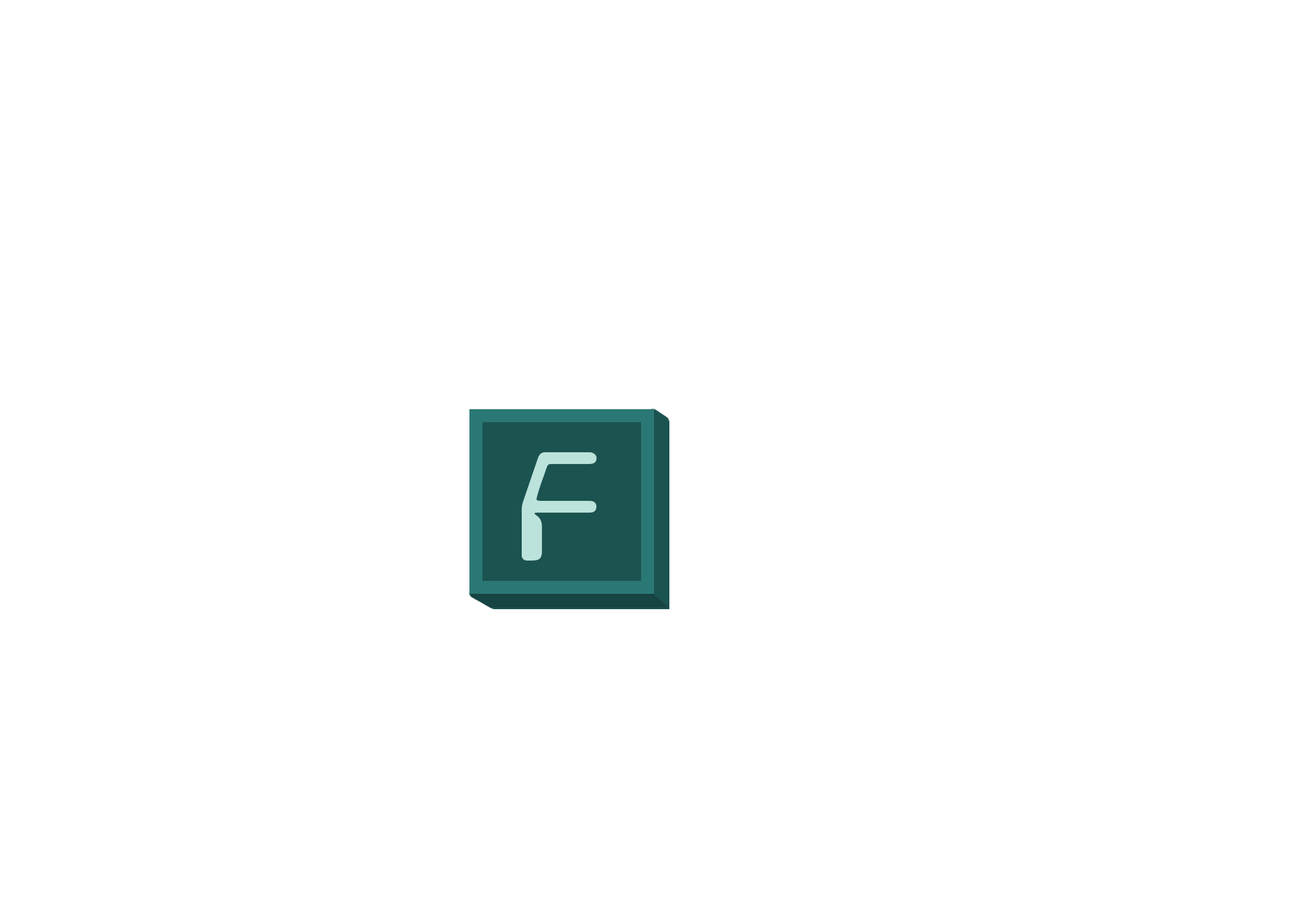
<style>
.page{position:relative;width:1292px;height:923px;background:#ffffff}
.page>*{position:absolute;margin:0}
.t1{font:153.8px "DestructoBeamBB";color:#bce3db}
</style>
<div class="page">
<p class="t1" style="left:522px;top:452px;width:75px;height:109px">f</p>
</div>
